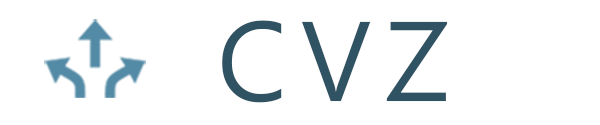
<style>
.page{position:relative;width:600px;height:125px;background:#ffffff}
.page>*{position:absolute;margin:0}
.t1{font:112.9px "SegoeUISymbol";letter-spacing:-0.075em;color:#305364;text-transform:uppercase}
</style>
<div class="page">
<p class="t1" style="left:222px;top:20px;width:226px;height:83px">C V Z</p>
</div>
